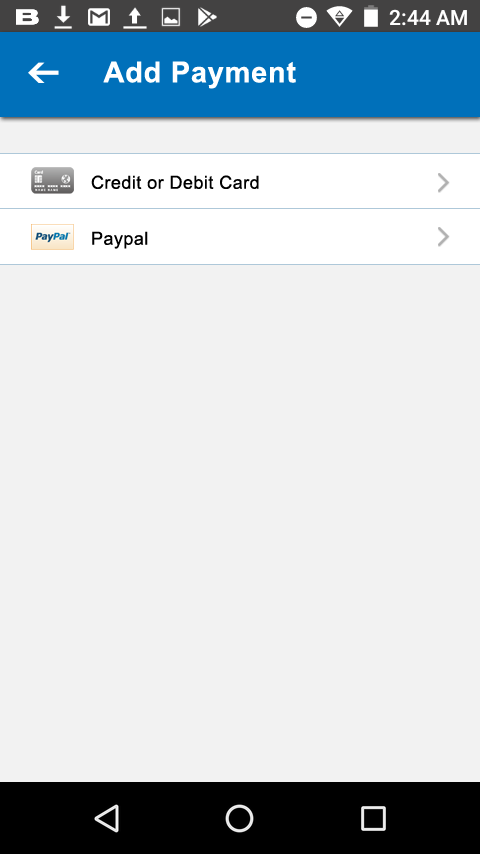
<style>
.page{position:relative;width:480px;height:854px;background:#f2f2f2}
.page>*{position:absolute;margin:0}
.t1{font:29px "Arial-BoldMT";letter-spacing:0.025em;color:#ffffff}
.t2{font:18px "ArialMT";letter-spacing:0.025em;color:#000000}
</style>
<div class="page">
<p class="t1" style="left:103px;top:61px;width:193px;height:28px">Add Payment</p>
<p class="t2" style="left:91px;top:175px;width:168px;height:14px">Credit or Debit Card</p>
<p class="t2" style="left:92px;top:231px;width:56px;height:18px">Paypal</p>
</div>
